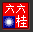
<style>
.page{position:relative;width:33px;height:32px;background:#f20000}
.page>*{position:absolute;margin:0}
.t1{font:10.4px "SimSun";color:#ffffff}
.t2{font:11.7px "SimSun";color:#ffffff}
</style>
<div class="page">
<p class="t1" style="left:5px;top:4px;width:20px;height:9px">六六</p>
<p class="t2" style="left:16px;top:15px;width:11px;height:12px">桂</p>
</div>
